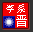
<style>
.page{position:relative;width:33px;height:32px;background:#f20000}
.page>*{position:absolute;margin:0}
.t1{font:10.4px "SimSun";color:#ffffff}
.t2{font:11.7px "SimSun";color:#ffffff}
</style>
<div class="page">
<p class="t1" style="left:6px;top:4px;width:19px;height:9px">李系</p>
<p class="t2" style="left:16px;top:15px;width:11px;height:12px">晋</p>
</div>
